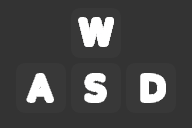
<style>
.page{position:relative;width:192px;height:128px;background:#333333}
.page>*{position:absolute;margin:0}
.t1{font:33px "DejaVuSans";color:#ffffff}
</style>
<div class="page">
<p class="t1" style="left:29px;top:75px;width:23px;height:25px">A</p>
<p class="t1" style="left:87px;top:75px;width:18px;height:26px">S</p>
<p class="t1" style="left:143px;top:75px;width:21px;height:25px">D</p>
</div>
